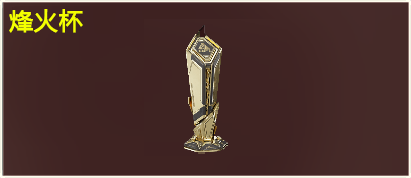
<style>
.page{position:relative;width:411px;height:178px}
.page>*{position:absolute;margin:0}
.t1{font:24px "MicrosoftYaHei";color:#f4ff00;font-weight:bold}
</style>
<div class="page">
<p class="t1" style="left:9px;top:9px;width:74px;height:24px">烽火杯</p>
</div>
